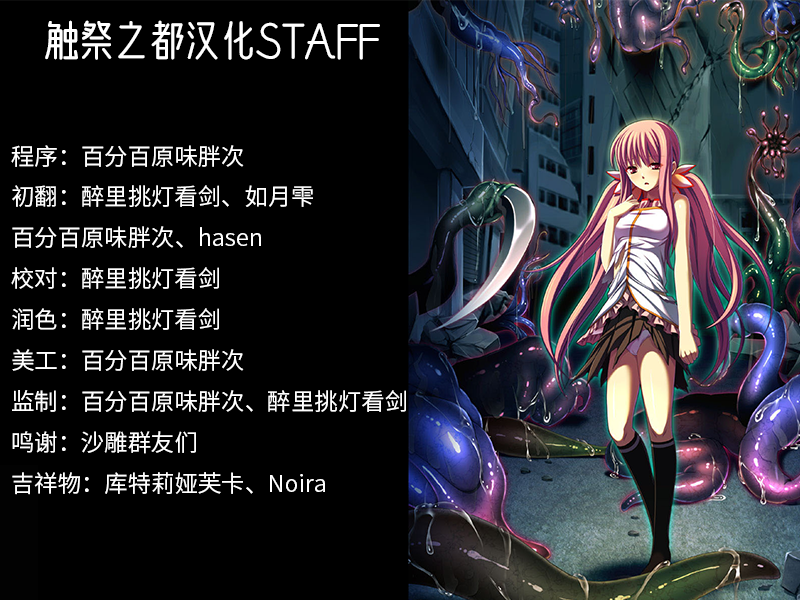
<style>
.page{position:relative;width:800px;height:600px;background:#000000}
.page>*{position:absolute;margin:0}
.t1{font:41.7px "WenCang-Regular";color:#ffffff}
.t2{font:23.4px "SourceHanSansSC-Normal";color:#ffffff}
</style>
<div class="page">
<p class="t1" style="left:45px;top:20px;width:335px;height:40px">触祭之都汉化STAFF</p>
<p class="t2" style="left:11px;top:145px;width:395px;height:350px">程序：百分百原味胖次<br>初翻：醉里挑灯看剑、如月雫 <br>百分百原味胖次、hasen<br>校对：醉里挑灯看剑<br>润色：醉里挑灯看剑<br>美工：百分百原味胖次<br>监制：百分百原味胖次、醉里挑灯看剑<br>鸣谢：沙雕群友们<br>吉祥物：库特莉娅芙卡、Noira</p>
</div>
